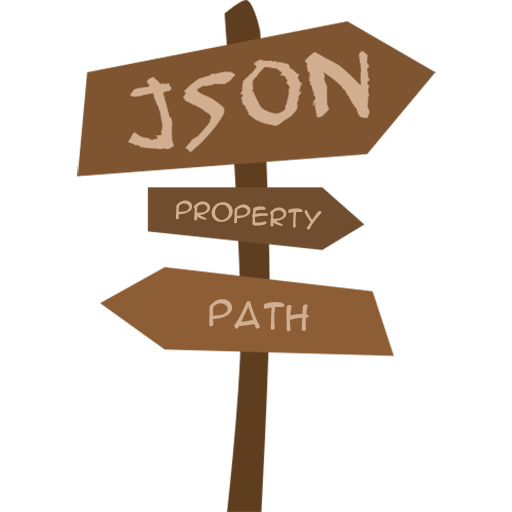
<style>
.page{position:relative;width:512px;height:512px;background:#ffffff}
.page>*{position:absolute;margin:0}
.t1{font:23.1px "AnimeAcev02";color:#d1ae8f}
.t2{font:33.1px "AnimeAcev02";color:#d1ae8f}
</style>
<div class="page">
<p class="t1" style="left:176px;top:200px;width:146px;height:30px;rotate:5deg">property</p>
<p class="t2" style="left:209px;top:299px;width:100px;height:33px;rotate:4deg">path</p>
</div>
